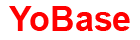
<style>
.page{position:relative;width:140px;height:40px;background:#ffffff}
.page>*{position:absolute;margin:0}
.t1{font:34px "Arial-BoldMT";color:#ff0000}
</style>
<div class="page">
<p class="t1" style="left:9px;top:6px;width:121px;height:25px">YoBase</p>
</div>
